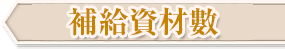
<style>
.page{position:relative;width:285px;height:49px;background:#e8d9c9}
.page>*{position:absolute;margin:0}
.t1{font:30px "RyuminPr6N-ExBold";color:#c58301}
</style>
<div class="page">
<p class="t1" style="left:68px;top:7px;width:150px;height:29px">補給資材數</p>
</div>
